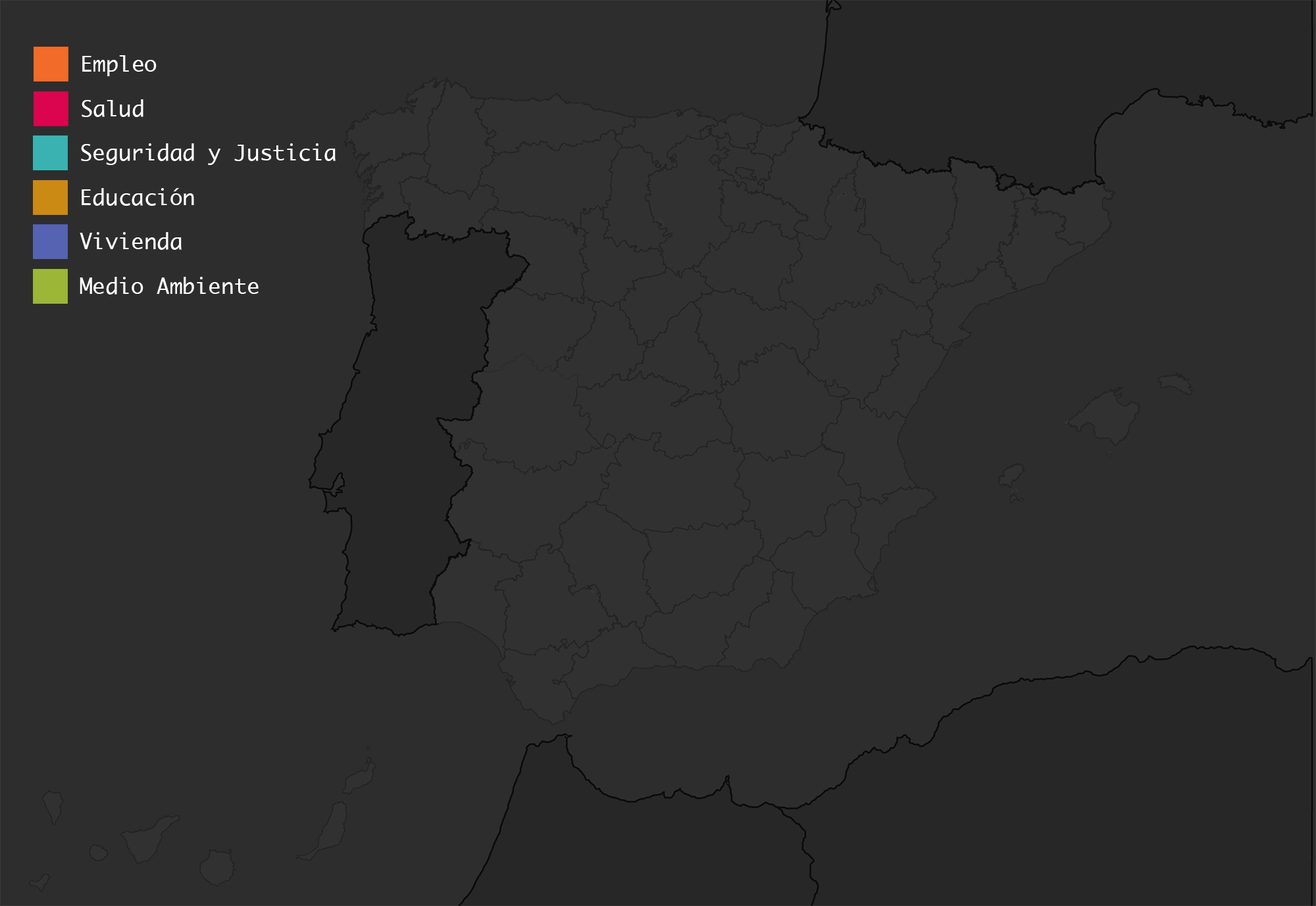
<style>
.page{position:relative;width:1316px;height:906px;background:#2d2d2d}
.page>*{position:absolute;margin:0}
.t1{font:21.4px "Ayuthaya";color:#ffffff}
</style>
<div class="page">
<p class="t1" style="left:82px;top:55px;width:75px;height:21px">Empleo</p>
<p class="t1" style="left:82px;top:99px;width:61px;height:18px">Salud</p>
<p class="t1" style="left:81px;top:143px;width:254px;height:22px">Seguridad y Justicia</p>
<p class="t1" style="left:82px;top:188px;width:112px;height:18px">Educación</p>
<p class="t1" style="left:80px;top:232px;width:102px;height:18px">Vivienda</p>
<p class="t1" style="left:80px;top:277px;width:179px;height:18px">Medio Ambiente</p>
</div>
